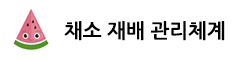
<style>
.page{position:relative;width:240px;height:60px;background:#ffffff}
.page>*{position:absolute;margin:0}
.t1{font:20px "NanumGothicBold";color:#000000}
</style>
<div class="page">
<p class="t1" style="left:64px;top:21px;width:161px;height:20px">채소 재배 관리체계</p>
</div>
